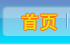
<style>
.page{position:relative;width:70px;height:45px}
.page>*{position:absolute;margin:0}
.t1{font:18px "SimHei";letter-spacing:0.04em;color:#ebe316;font-weight:bold}
</style>
<div class="page">
<p class="t1" style="left:21px;top:13px;width:36px;height:18px">首页</p>
</div>
